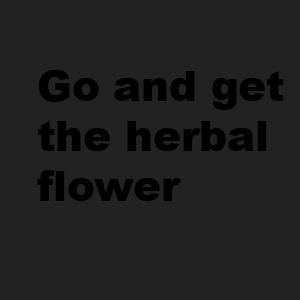
<style>
.page{position:relative;width:300px;height:300px;background:#222222}
.page>*{position:absolute;margin:0}
.t1{font:41.7px "Arial-Black";color:#000000}
</style>
<div class="page">
<p class="t1" style="left:37px;top:70px;width:247px;height:131px">Go and get<br>the herbal<br>flower</p>
</div>
